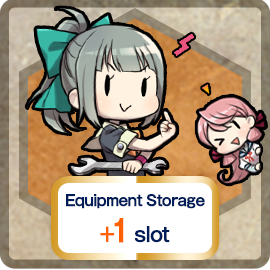
<style>
.page{position:relative;width:270px;height:270px}
.page>*{position:absolute;margin:0}
.t1{font:15px "GothicMB101Pro-Medium";letter-spacing:-0.04em;color:#001d59;font-weight:bold;scale:0.9 1}
.t2{font:20px "GothicMB101Pro-Medium";letter-spacing:-0.04em;color:#ff6000;font-weight:bold;scale:0.9 1}
.t3{font:30px "GothicMB101Pro-Medium";letter-spacing:-0.04em;color:#ff6000;font-weight:bold;scale:0.9 1}
.t4{font:20px "GothicMB101Pro-Medium";letter-spacing:-0.04em;color:#001d59;font-weight:bold;scale:0.9 1}
</style>
<div class="page">
<p class="t1" style="left:66px;top:194px;width:139px;height:49px;text-align:center">Equipment Storage<br><span class="t2">+</span><span class="t3">1 </span><span class="t4">slot</span></p>
</div>
